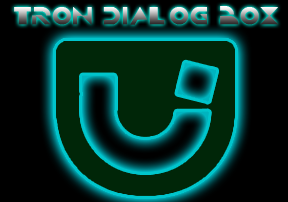
<style>
.page{position:relative;width:288px;height:202px;background:#000000}
.page>*{position:absolute;margin:0}
.t1{font:18px "TRON";text-transform:uppercase;font-weight:bold}
</style>
<div class="page">
<p class="t1" style="left:14px;top:6px;width:264px;height:19px">tron dialog box</p>
</div>
